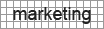
<style>
.page{position:relative;width:104px;height:29px;background:#ffffff}
.page>*{position:absolute;margin:0}
.t1{font:18px "ArialMT";color:#222222}
</style>
<div class="page">
<p class="t1" style="left:13px;top:7px;width:78px;height:17px">marketing</p>
</div>
